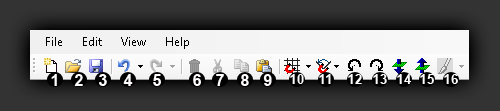
<style>
.page{position:relative;width:500px;height:111px}
.page>*{position:absolute;margin:0}
.t1{font:16px "Arial-BoldMT";color:#fefcfc}
.t2{font:13.3px "Arial-BoldMT";color:#fefcfc}
</style>
<div class="page">
<p class="t1" style="left:51px;top:74px;width:6px;height:12px">1</p>
<p class="t1" style="left:74px;top:74px;width:9px;height:12px">2</p>
<p class="t1" style="left:99px;top:74px;width:8px;height:12px">3</p>
<p class="t1" style="left:123px;top:74px;width:10px;height:12px">4</p>
<p class="t1" style="left:153px;top:74px;width:8px;height:12px">5</p>
<p class="t1" style="left:193px;top:74px;width:8px;height:12px">6</p>
<p class="t1" style="left:216px;top:74px;width:8px;height:12px">7</p>
<p class="t1" style="left:241px;top:74px;width:8px;height:12px">8</p>
<p class="t1" style="left:263px;top:74px;width:9px;height:12px">9</p>
<p class="t2" style="left:290px;top:74px;width:14px;height:10px">10</p>
<p class="t2" style="left:319px;top:74px;width:12px;height:10px">11</p>
<p class="t2" style="left:348px;top:74px;width:14px;height:10px">12</p>
<p class="t2" style="left:373px;top:74px;width:14px;height:10px">13</p>
<p class="t2" style="left:397px;top:74px;width:15px;height:10px">14</p>
<p class="t2" style="left:420px;top:74px;width:14px;height:10px">15</p>
<p class="t2" style="left:444px;top:74px;width:14px;height:10px">16</p>
</div>
